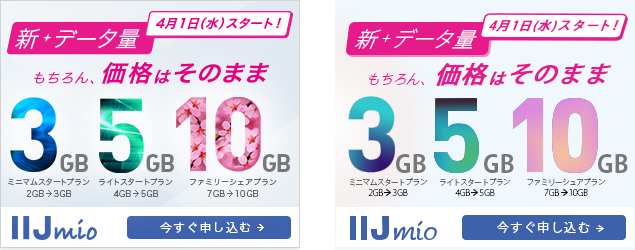
<style>
.page{position:relative;width:635px;height:250px}
.page>*{position:absolute;margin:0}
.t1{font:21.4px "KozGoPr6N-Light";letter-spacing:-0.025em;color:#ffffff;font-style:italic}
.t2{font:10.2px "KozGoPr6N-Light";letter-spacing:-0.025em;color:#ffffff;font-style:italic}
.t3{font:12.5px "KozGoPr6N-Medium";letter-spacing:0.1em;color:#e61a8b;font-weight:bold;font-style:italic}
.t4{font:13.1px "KozGoPr6N-Light";letter-spacing:0.05em;color:#e61a8b;font-style:italic}
.t5{font:24.2px "KozGoPr6N-Medium";letter-spacing:0.05em;color:#e61a8b;font-weight:bold;font-style:italic}
.t6{font:16.1px "KozGoPr6N-Medium";letter-spacing:0.05em;color:#e61a8b;font-weight:bold;font-style:italic}
.t7{font:24px "KozGoPr6N-Bold";color:#777777}
.t8{font:9px/10px "KozGoPr6N-ExtraLight";letter-spacing:-0.05em;color:#040404}
.t9{font:7.5px/10px "KozGoPr6N-ExtraLight";letter-spacing:-0.05em;color:#040404}
.t10{font:12px "KozGoPr6N-Regular";letter-spacing:0.125em;color:#ffffff}
</style>
<div class="page">
<p class="t1" style="left:355px;top:28px;width:122px;height:21px">新<span class="t2">＋</span>データ量</p>
<p class="t3" style="left:489px;top:19px;width:130px;height:14px">4月1日(水)スタート!</p>
<p class="t4" style="left:369px;top:62px;width:243px;height:24px">もちろん、<span class="t5">価格</span><span class="t6">は</span><span class="t5">そのまま</span></p>
<p class="t7" style="left:396px;top:154px;width:30px;height:19px">GB</p>
<p class="t7" style="left:484px;top:154px;width:30px;height:19px">GB</p>
<p class="t7" style="left:598px;top:154px;width:30px;height:19px">GB</p>
<p class="t8" style="left:349px;top:178px;width:79px;height:18px;text-align:center"><span class="t9">ミニマムスタートプラン<br></span>2GB      3GB</p>
<p class="t8" style="left:439px;top:178px;width:72px;height:18px;text-align:center"><span class="t9">ライトスタートプラン<br></span>4GB      5GB</p>
<p class="t8" style="left:527px;top:178px;width:79px;height:18px;text-align:center"><span class="t9">ファミリーシュアプラン<br></span>7GB      10GB</p>
<p class="t10" style="left:497px;top:221px;width:93px;height:12px">今すぐ申し込む</p>
</div>
